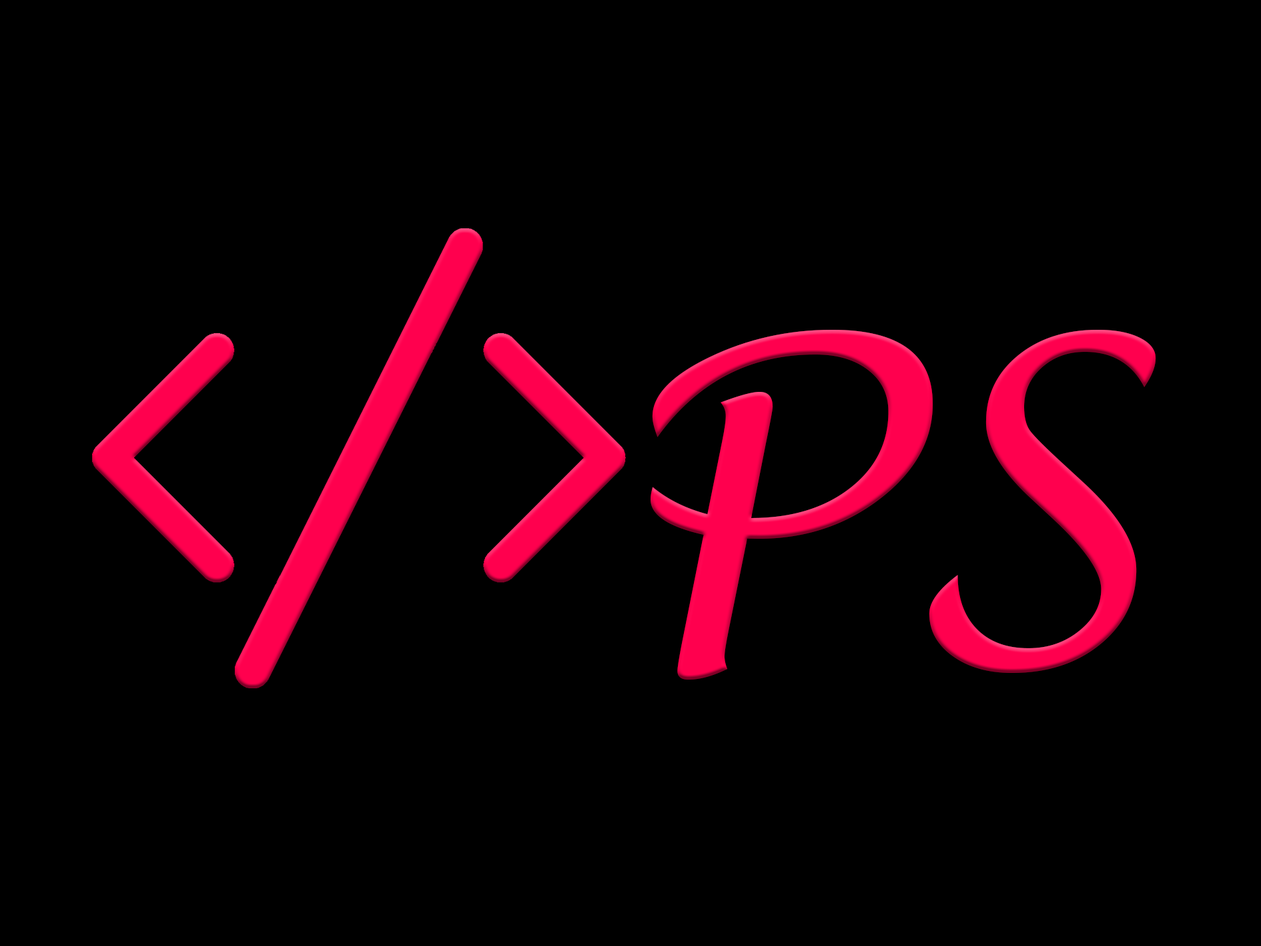
<style>
.page{position:relative;width:1261px;height:946px;background:#000000}
.page>*{position:absolute;margin:0}
.t1{font:430.7px "LucidaHandwriting-Italic";color:#ff004e}
</style>
<div class="page">
<p class="t1" style="left:651px;top:330px;width:505px;height:349px">PS</p>
</div>
